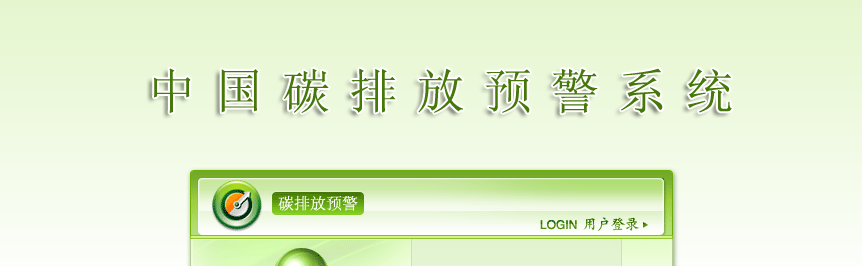
<style>
.page{position:relative;width:862px;height:266px}
.page>*{position:absolute;margin:0}
.t1{font:48px "SimSun";letter-spacing:0.4em;color:#457709}
.t2{font:16px "SimSun";color:#ffffff}
</style>
<div class="page">
<p class="t1" style="left:154px;top:68px;width:578px;height:46px">中国碳排放预警系统</p>
<p class="t2" style="left:278px;top:195px;width:80px;height:16px">碳排放预警</p>
</div>
